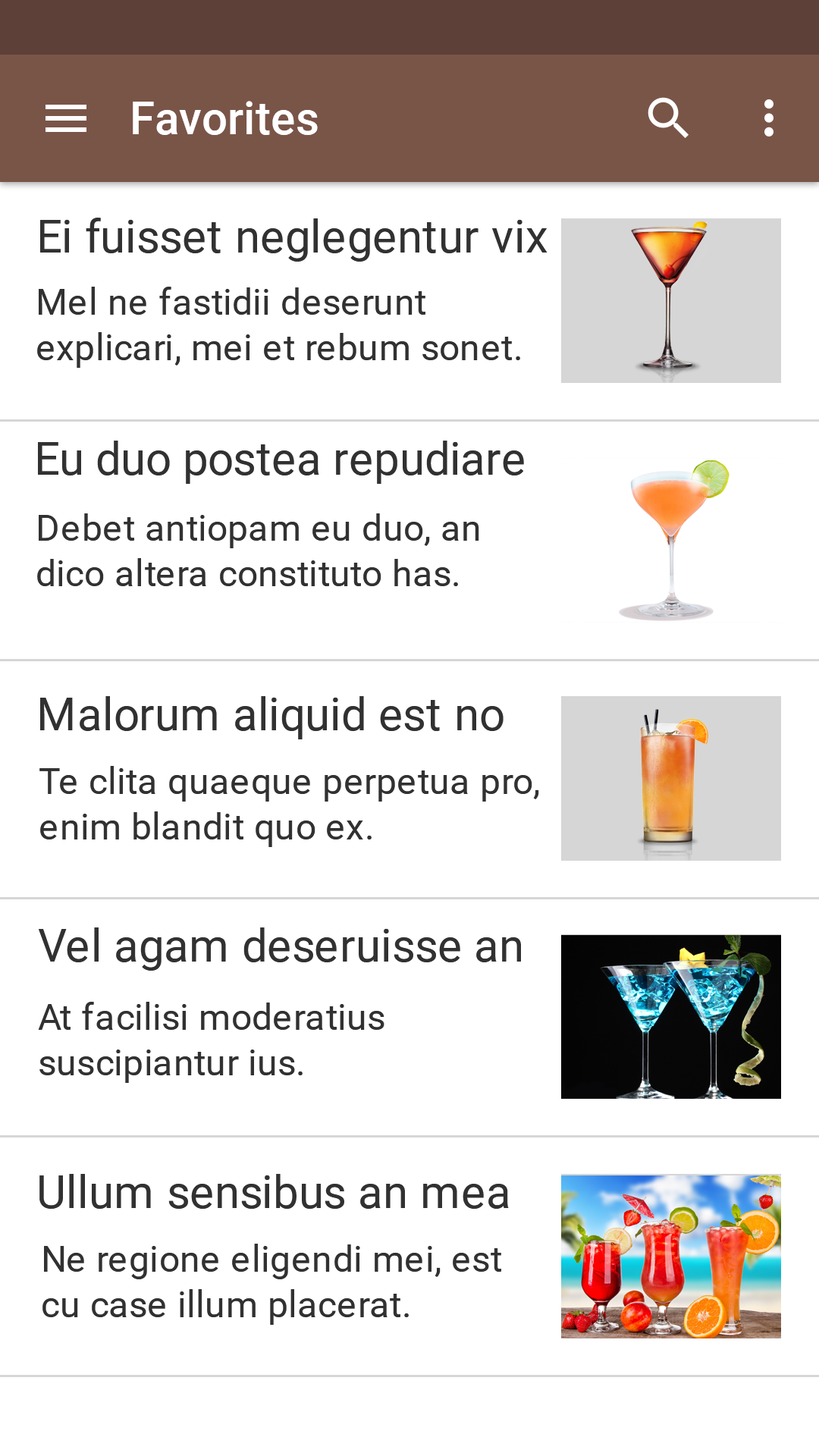
<style>
.page{position:relative;width:819px;height:1456px;background:#ffffff}
.page>*{position:absolute;margin:0}
.t1{font:45.5px "Roboto-Medium";letter-spacing:0.005em;color:#ffffff}
.t2{font:45.5px "Roboto-Regular";letter-spacing:0.005em;color:#313131}
.t3{font:36.4px/45.5px "Roboto-Regular";letter-spacing:0.01em;color:#313131}
</style>
<div class="page">
<p class="t1" style="left:133px;top:101px;width:185px;height:34px">Favorites</p>
<p class="t2" style="left:40px;top:218px;width:508px;height:44px">Ei fuisset neglegentur vix</p>
<p class="t3" style="left:37px;top:287px;width:483px;height:81px">Mel ne fastidii deserunt explicari, mei et rebum sonet.</p>
<p class="t2" style="left:38px;top:441px;width:486px;height:43px">Eu duo postea repudiare</p>
<p class="t3" style="left:37px;top:513px;width:442px;height:73px">Debet antiopam eu duo, an dico altera constituto has.</p>
<p class="t2" style="left:40px;top:696px;width:464px;height:43px">Malorum aliquid est no</p>
<p class="t3" style="left:39px;top:766px;width:500px;height:81px">Te clita quaeque perpetua pro, enim blandit quo ex.</p>
<p class="t2" style="left:39px;top:927px;width:482px;height:44px">Vel agam deseruisse an</p>
<p class="t3" style="left:38px;top:1002px;width:346px;height:81px">At facilisi moderatius suscipiantur ius.</p>
<p class="t2" style="left:39px;top:1174px;width:470px;height:35px">Ullum sensibus an mea</p>
<p class="t3" style="left:42px;top:1244px;width:459px;height:81px">Ne regione eligendi mei, est cu case illum placerat.</p>
</div>
